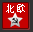
<style>
.page{position:relative;width:33px;height:32px;background:#c50000}
.page>*{position:absolute;margin:0}
.t1{font:10.4px "SimSun";color:#ffffff}
</style>
<div class="page">
<p class="t1" style="left:6px;top:4px;width:19px;height:9px">北欧</p>
</div>
